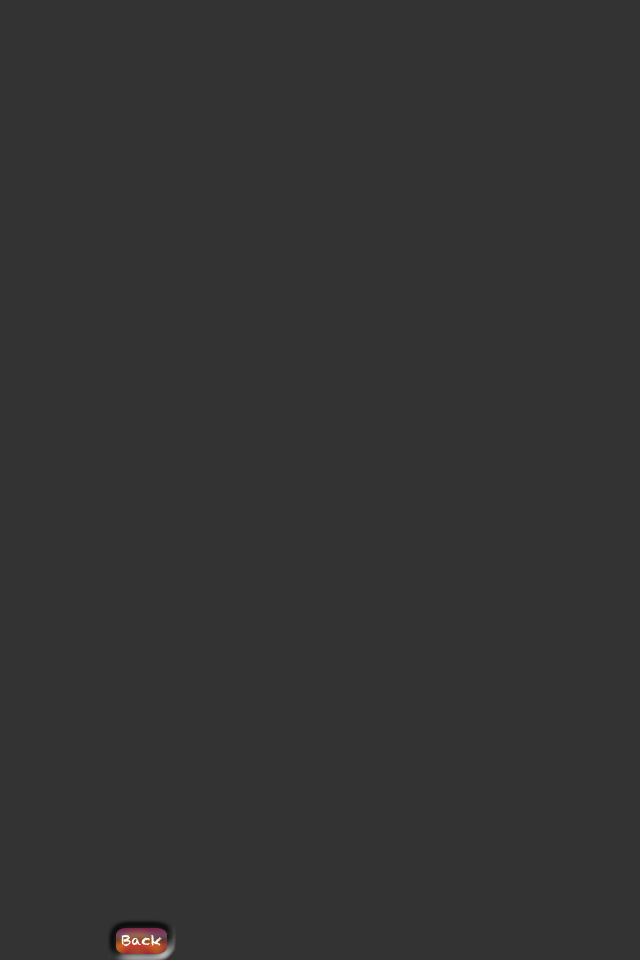
<style>
.page{position:relative;width:640px;height:960px;background:#333333}
.page>*{position:absolute;margin:0}
.t1{font:14.4px "Chalkduster";letter-spacing:0.025em;color:#fcfbfa}
</style>
<div class="page">
<p class="t1" style="left:121px;top:934px;width:41px;height:13px">Back</p>
</div>
